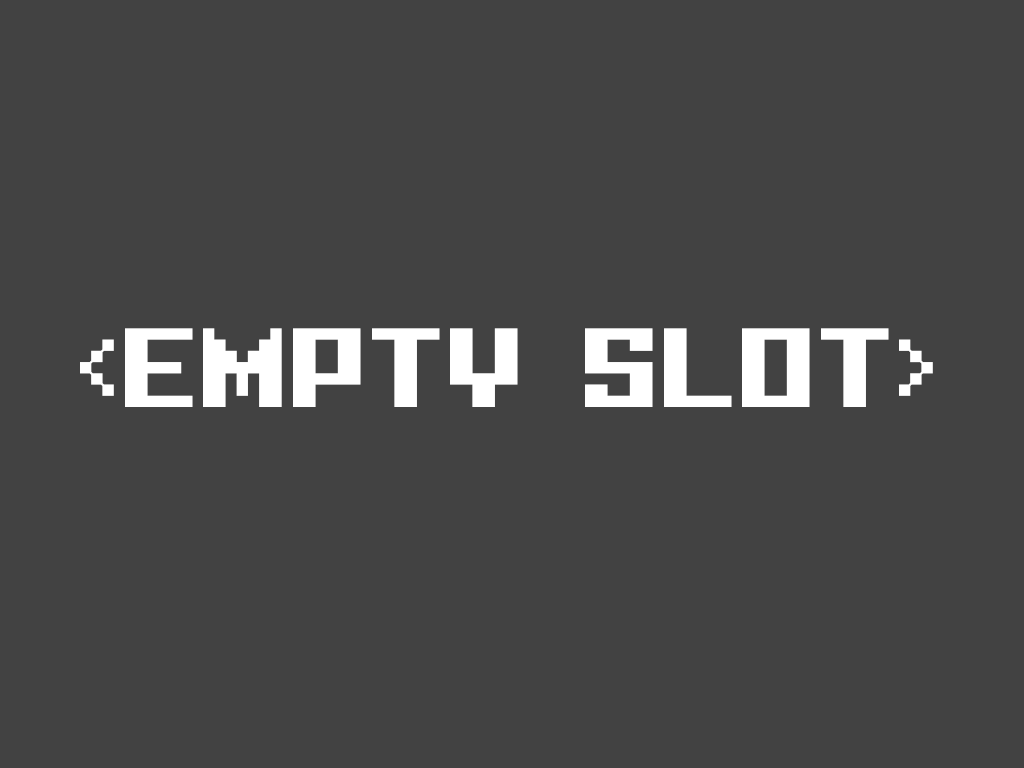
<style>
.page{position:relative;width:1024px;height:768px;background:#424242}
.page>*{position:absolute;margin:0}
.t1{font:115px "PixelIntv";color:#ffffff}
</style>
<div class="page">
<p class="t1" style="left:80px;top:328px;width:853px;height:79px">&lt;EMPTY SLOT&gt;</p>
</div>
